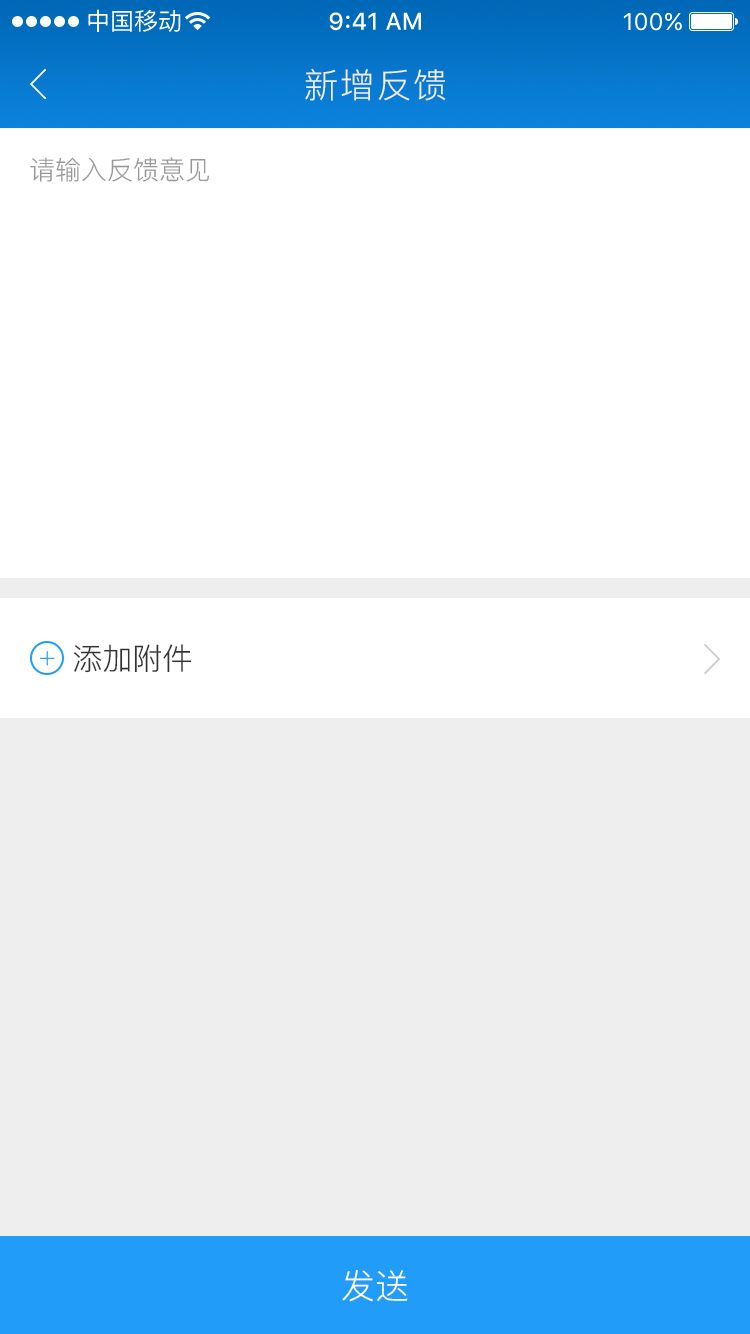
<style>
.page{position:relative;width:750px;height:1334px;background:#ffffff}
.page>*{position:absolute;margin:0}
.t1{font:34px "PingFang-SC-Regular";letter-spacing:0.06em;color:#eeeeee}
.t2{font:26px "PingFang-SC-Regular";color:#999999}
.t3{font:30px "PingFang-SC-Regular";color:#333333}
.t4{font:34px "PingFang-SC-Regular";color:#ffffff}
</style>
<div class="page">
<p class="t1" style="left:305px;top:68px;width:141px;height:33px">新增反馈</p>
<p class="t2" style="left:30px;top:157px;width:180px;height:25px">请输入反馈意见</p>
<p class="t3" style="left:74px;top:644px;width:118px;height:29px">添加附件</p>
<p class="t4" style="left:342px;top:1270px;width:66px;height:32px">发送</p>
</div>
